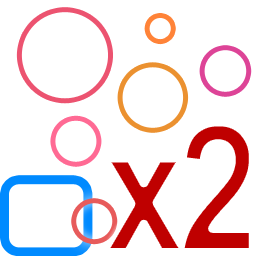
<style>
.page{position:relative;width:256px;height:256px;background:#ffffff}
.page>*{position:absolute;margin:0}
.t1{font:180px "Arial-BoldMT";letter-spacing:-0.075em;scale:0.83 1}
</style>
<div class="page">
<p class="t1" style="left:103px;top:122px;width:150px;height:130px">x2</p>
</div>
